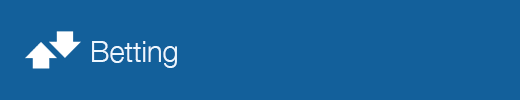
<style>
.page{position:relative;width:520px;height:100px;background:#13609b}
.page>*{position:absolute;margin:0}
.t1{font:29px "HelveticaNeue-Light";color:#edf7ff}
</style>
<div class="page">
<p class="t1" style="left:92px;top:41px;width:85px;height:27px">Betting</p>
</div>
